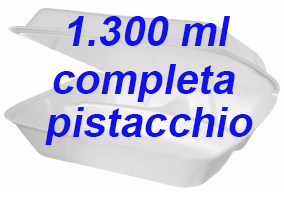
<style>
.page{position:relative;width:284px;height:204px;background:#fefefe}
.page>*{position:absolute;margin:0}
.t1{font:72px "Arial-BoldMT";color:#1111ea;font-style:italic}
</style>
<div class="page">
<p class="t1" style="left:68px;top:16px;width:162px;height:30px">1.300 ml</p>
<p class="t1" style="left:53px;top:64px;width:182px;height:38px">completa</p>
<p class="t1" style="left:45px;top:107px;width:208px;height:38px">pistacchio</p>
</div>
